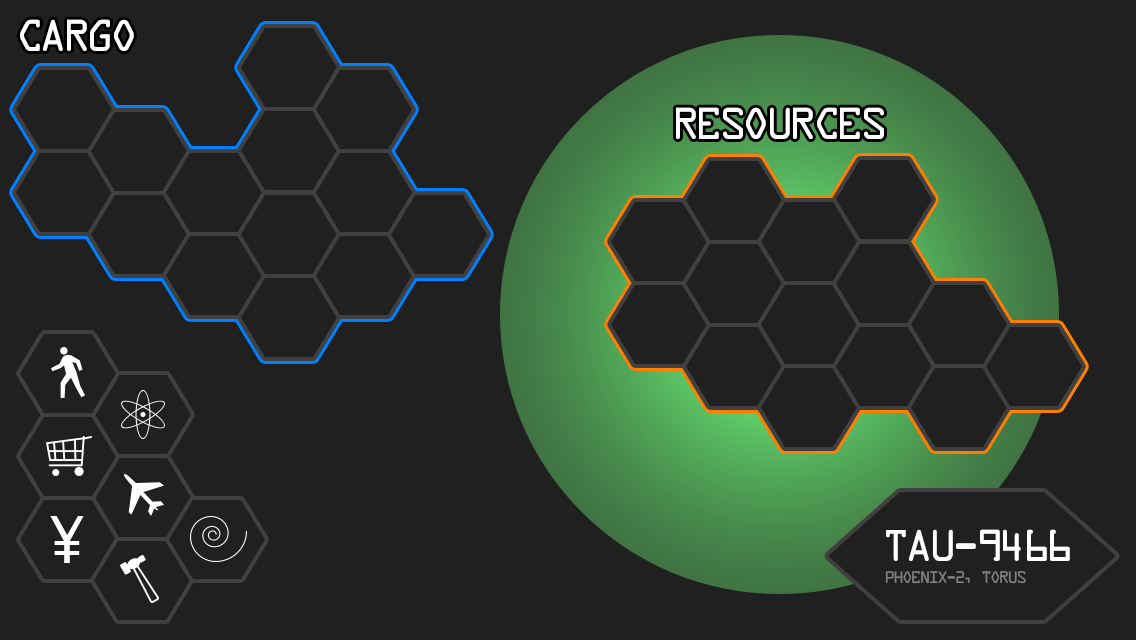
<style>
.page{position:relative;width:1136px;height:640px;background:#202020}
.page>*{position:absolute;margin:0}
.t1{font:48px "DataControl";color:#ffffff}
.t2{font:60px "Monaco";color:#ffffff}
.t3{font:18px "DataControl";color:#808080}
</style>
<div class="page">
<p class="t1" style="left:20px;top:19px;width:114px;height:32px">Cargo</p>
<p class="t1" style="left:676px;top:107px;width:208px;height:32px">Resources</p>
<p class="t2" style="left:50px;top:516px;width:34px;height:47px">¥</p>
<p class="t1" style="left:886px;top:529px;width:184px;height:32px">TAU-9466</p>
<p class="t3" style="left:885px;top:571px;width:141px;height:13px">phoenix-2, torus</p>
</div>
